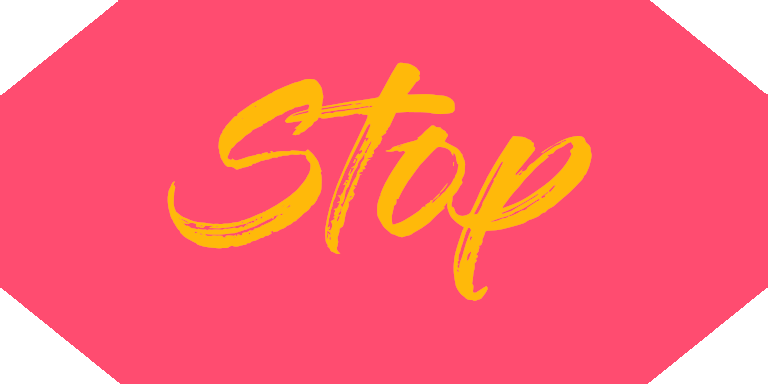
<style>
.page{position:relative;width:768px;height:384px;background:#ff4c70}
.page>*{position:absolute;margin:0}
.t1{font:150px "GlossAndBloom";color:#ffc000;scale:1.24 1}
</style>
<div class="page">
<p class="t1" style="left:167px;top:62px;width:425px;height:239px;opacity:0.9">Stop</p>
</div>
